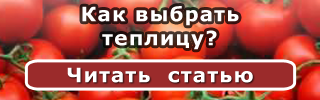
<style>
.page{position:relative;width:320px;height:100px}
.page>*{position:absolute;margin:0}
.t1{font:20px "Verdana-Bold";letter-spacing:0.06em;color:#ffffff}
</style>
<div class="page">
<p class="t1" style="left:82px;top:6px;width:157px;height:44px;text-align:center">Как выбрать <br>теплицу?</p>
<p class="t1" style="left:67px;top:67px;width:186px;height:16px">Читать  статью</p>
</div>
